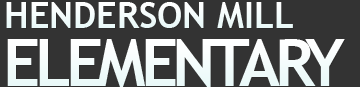
<style>
.page{position:relative;width:360px;height:87px;background:#333333}
.page>*{position:absolute;margin:0}
.t1{font:36px "TrebuchetMS-Bold";color:#ffffff;text-transform:uppercase}
.t2{font:65px "TrebuchetMS-Bold";letter-spacing:-0.08em;color:#ffffff;text-transform:uppercase}
</style>
<div class="page">
<p class="t1" style="left:6px;top:2px;width:287px;height:26px">Henderson Mill</p>
<p class="t2" style="left:7px;top:39px;width:338px;height:48px">Elementary</p>
</div>
